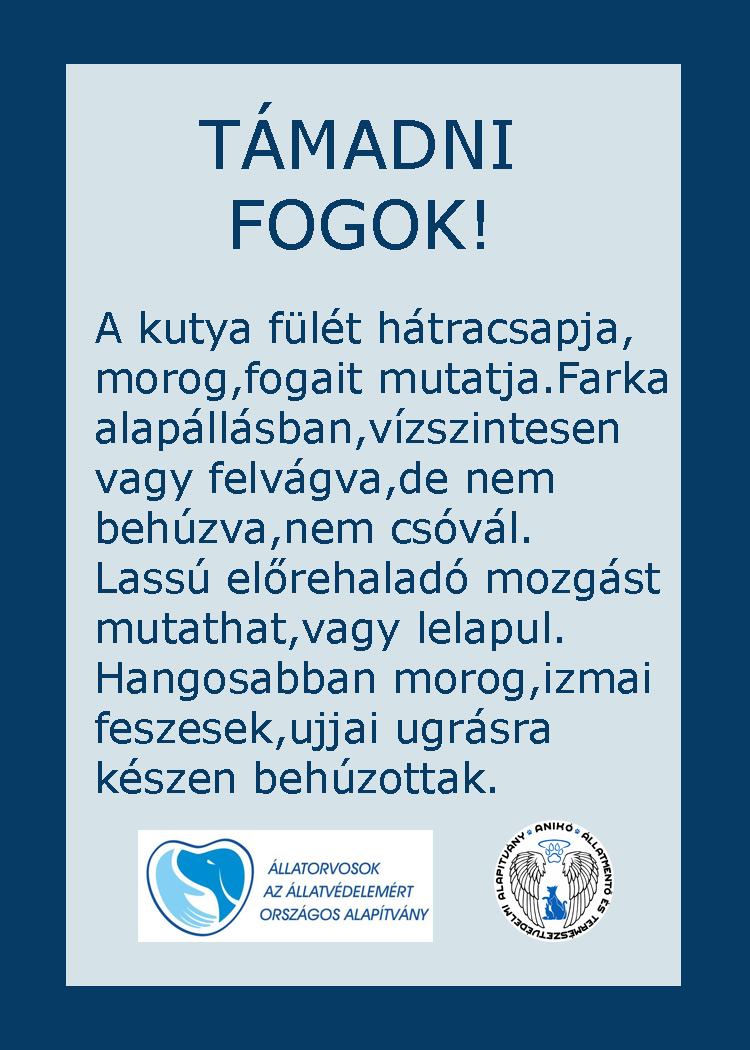
<style>
.page{position:relative;width:750px;height:1050px;background:#d5e2e7}
.page>*{position:absolute;margin:0}
.t1{font:66.7px "Verdana";color:#053b65}
.t2{font:66.7px "GravitateBRK";color:#053b65}
.t3{font:41.7px "Verdana";color:#053b65}
</style>
<div class="page">
<p class="t1" style="left:199px;top:102px;width:313px;height:148px;text-align:center"><span class="t2">         </span>TÁMADNI <br>            FOGOK!</p>
<p class="t3" style="left:95px;top:308px;width:572px;height:486px">A kutya fülét hátracsapja,<br>morog,fogait mutatja.Farka <br>alapállásban,vízszintesen <br>vagy felvágva,de nem <br>behúzva,nem csóvál.<br>Lassú előrehaladó mozgást<br>mutathat,vagy lelapul.<br>Hangosabban morog,izmai <br>feszesek,ujjai ugrásra <br>készen behúzottak.</p>
</div>
